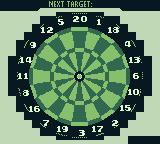
<style>
.page{position:relative;width:160px;height:144px;background:#071821}
.page>*{position:absolute;margin:0}
.t1{font:8px "Early-GameBoy";letter-spacing:-0.12em;color:#e0f8cf}
.t2{font:8px "Early-GameBoy";color:#e0f8cf}
.t3{font:8px "Early-GameBoy";letter-spacing:-0.24em;color:#e0f8cf}
.t4{font:8px "Early-GameBoy";letter-spacing:-0.18em;color:#e0f8cf}
.t5{font:8px "Early-GameBoy";letter-spacing:-0.34em;color:#e0f8cf}
</style>
<div class="page">
<p class="t1" style="left:73px;top:16px;width:14px;height:6px">20</p>
<p class="t1" style="left:41px;top:27px;width:12px;height:6px">12</p>
<p class="t2" style="left:58px;top:19px;width:6px;height:6px">5</p>
<p class="t3" style="left:97px;top:19px;width:4px;height:6px">1</p>
<p class="t3" style="left:108px;top:27px;width:11px;height:6px">18</p>
<p class="t3" style="left:125px;top:41px;width:6px;height:6px">4</p>
<p class="t2" style="left:30px;top:42px;width:6px;height:6px">9</p>
<p class="t4" style="left:20px;top:57px;width:12px;height:6px">14</p>
<p class="t3" style="left:129px;top:57px;width:11px;height:6px">13</p>
<p class="t5" style="left:18px;top:73px;width:10px;height:6px">11</p>
<p class="t3" style="left:133px;top:73px;width:6px;height:6px">6</p>
<p class="t3" style="left:128px;top:89px;width:11px;height:6px">10</p>
<p class="t1" style="left:23px;top:90px;width:6px;height:6px">8</p>
<p class="t3" style="left:29px;top:106px;width:11px;height:6px">16</p>
<p class="t3" style="left:120px;top:105px;width:11px;height:6px">15</p>
<p class="t3" style="left:43px;top:120px;width:6px;height:6px">7</p>
<p class="t3" style="left:57px;top:126px;width:11px;height:6px">19</p>
<p class="t3" style="left:92px;top:126px;width:11px;height:6px">17</p>
<p class="t3" style="left:112px;top:120px;width:6px;height:6px">2</p>
<p class="t3" style="left:79px;top:130px;width:6px;height:6px">3</p>
</div>
